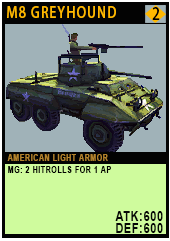
<style>
.page{position:relative;width:170px;height:241px;background:#a0b2b8}
.page>*{position:absolute;margin:0}
.t1{font:15.1px "AdobeHeitiStd-Regular";letter-spacing:0.08em;color:#ffb800;text-transform:uppercase;scale:0.86 1}
.t2{font:16.2px "AdobeHeitiStd-Regular";letter-spacing:0.08em;color:#000000;text-transform:uppercase;scale:0.86 1}
.t3{font:9.3px/12px "Arial-BoldMT";letter-spacing:0.08em;color:#020100;text-transform:uppercase;scale:0.76 1}
.t4{font:9.3px/20.2px "Arial-BoldMT";letter-spacing:0.08em;color:#b4832c;text-transform:uppercase;scale:0.76 1}
.t5{font:13.9px/12px "Arial-BoldMT";letter-spacing:0.08em;color:#050606;text-transform:uppercase;scale:0.76 1}
</style>
<div class="page">
<p class="t1" style="left:7px;top:6px;width:109px;height:12px">m8 gREYHOUND</p>
<p class="t2" style="left:152px;top:7px;width:8px;height:13px">2</p>
<p class="t3" style="left:7px;top:154px;width:156px;height:79px"><span class="t4">aMERICAN lIGHT aRMOR<br></span>mg: 2 hitrolls for 1 ap<br><br><br><br><span class="t5">atk:600<br>def:600</span></p>
</div>
